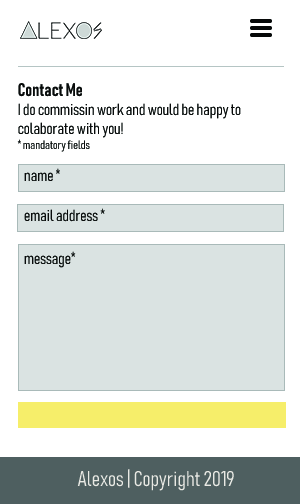
<style>
.page{position:relative;width:300px;height:504px;background:#ffffff}
.page>*{position:absolute;margin:0}
.t1{font:16px "Bahnschrift-LightCondensed";color:#090b0b}
.t2{font:18px "Bahnschrift-SemiBoldCondensed";color:#090b0b}
.t3{font:12px "Bahnschrift-LightCondensed";color:#090b0b}
.t4{font:21.1px "Bahnschrift-LightCondensed";color:#e9e9e4}
</style>
<div class="page">
<p class="t1" style="left:17px;top:83px;width:224px;height:69px"><span class="t2">Contact Me<br></span>I do commissin work and would be happy to <br>colaborate with you!<br><span class="t3">* mandatory fields</span></p>
<p class="t1" style="left:24px;top:168px;width:36px;height:13px">name *</p>
<p class="t1" style="left:24px;top:208px;width:81px;height:14px">email address *</p>
<p class="t1" style="left:24px;top:251px;width:52px;height:17px">message*</p>
<p class="t4" style="left:77px;top:469px;width:157px;height:22px">Alexos | Copyright 2019</p>
</div>
